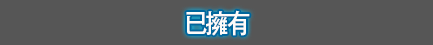
<style>
.page{position:relative;width:433px;height:45px;background:#565656}
.page>*{position:absolute;margin:0}
.t1{font:26px "GothicMB101Pr6N-Medium";letter-spacing:-0.08em;color:#fdfbf9;scale:0.9 1}
</style>
<div class="page">
<p class="t1" style="left:186px;top:10px;width:64px;height:26px">已擁有</p>
</div>
